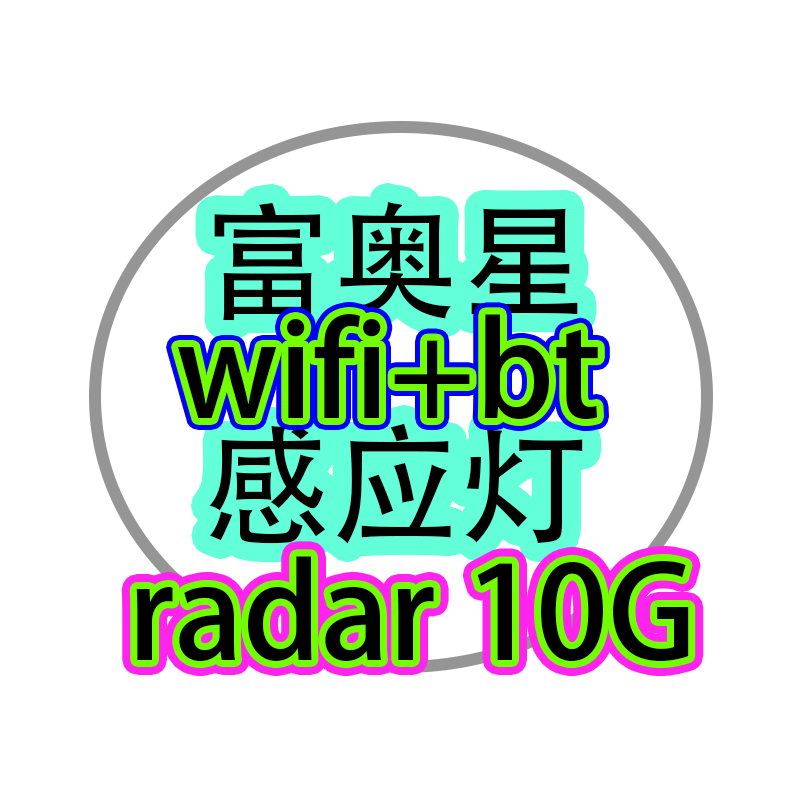
<style>
.page{position:relative;width:800px;height:800px;background:#ffffff}
.page>*{position:absolute;margin:0}
.t1{font:128px "AdobeHeitiStd-Regular";color:#000000}
</style>
<div class="page">
<p class="t1" style="left:209px;top:201px;width:374px;height:343px">富奥星<br>感应灯</p>
<p class="t1" style="left:178px;top:314px;width:420px;height:106px">wifi+bt</p>
<p class="t1" style="left:136px;top:556px;width:553px;height:106px">radar 10G</p>
</div>
